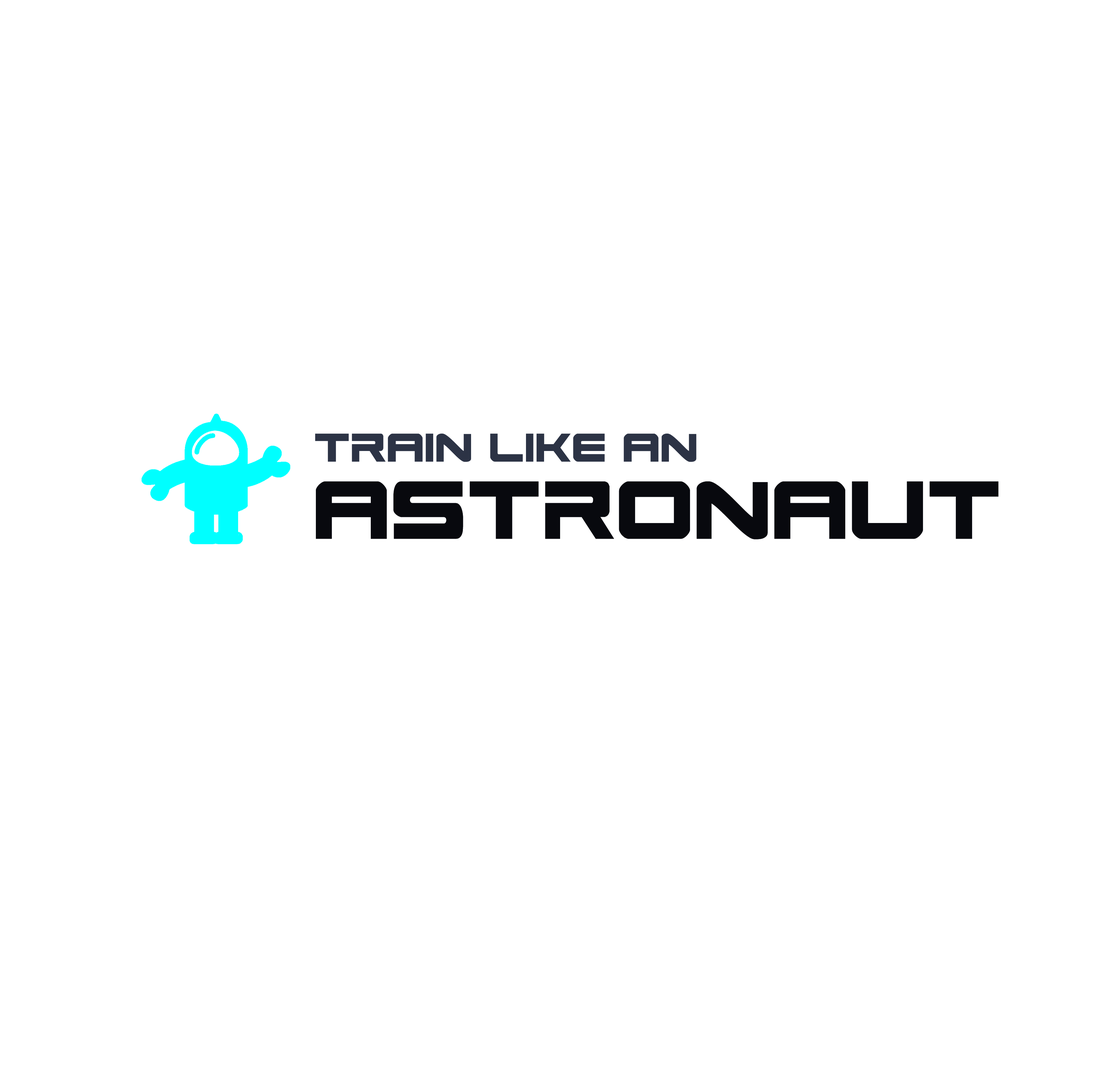
<style>
.page{position:relative;width:1097px;height:1087px;background:#ffffff}
.page>*{position:absolute;margin:0}
.t1{font:55.5px "SpaceRanger";color:#2c3346}
.t2{font:113.7px "SpaceRanger";color:#08090e}
</style>
<div class="page">
<p class="t1" style="left:315px;top:433px;width:382px;height:29px">train like an</p>
<p class="t2" style="left:316px;top:481px;width:683px;height:58px">astronaut</p>
</div>
